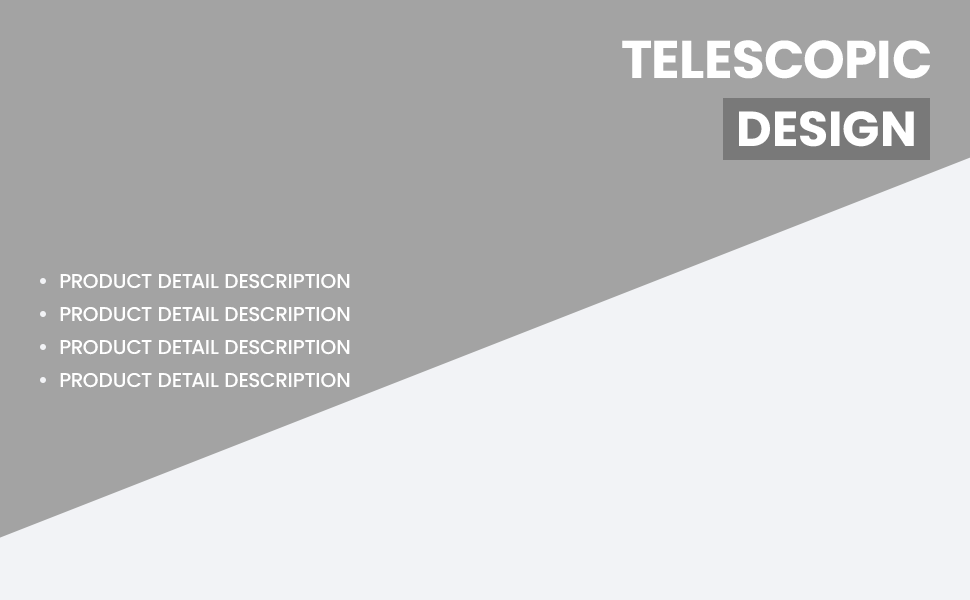
<style>
.page{position:relative;width:970px;height:600px;background:#a3a3a3}
.page>*{position:absolute;margin:0}
.t1{font:53px "Poppins-Bold";color:#ffffff;text-transform:uppercase}
.t2{font:49px "Poppins-Bold";color:#ffffff;text-transform:uppercase}
.t3{font:20px "Poppins-Medium";color:#ffffff;text-transform:uppercase}
</style>
<div class="page">
<p class="t1" style="left:622px;top:40px;width:308px;height:39px">TELESCOPIC</p>
<p class="t2" style="left:739px;top:111px;width:175px;height:36px">DESIGN</p>
<p class="t3" style="left:60px;top:274px;width:290px;height:15px">Product detail description</p>
<p class="t3" style="left:60px;top:307px;width:290px;height:15px">Product detail description</p>
<p class="t3" style="left:60px;top:340px;width:290px;height:15px">Product detail description</p>
<p class="t3" style="left:60px;top:373px;width:290px;height:15px">Product detail description</p>
</div>
